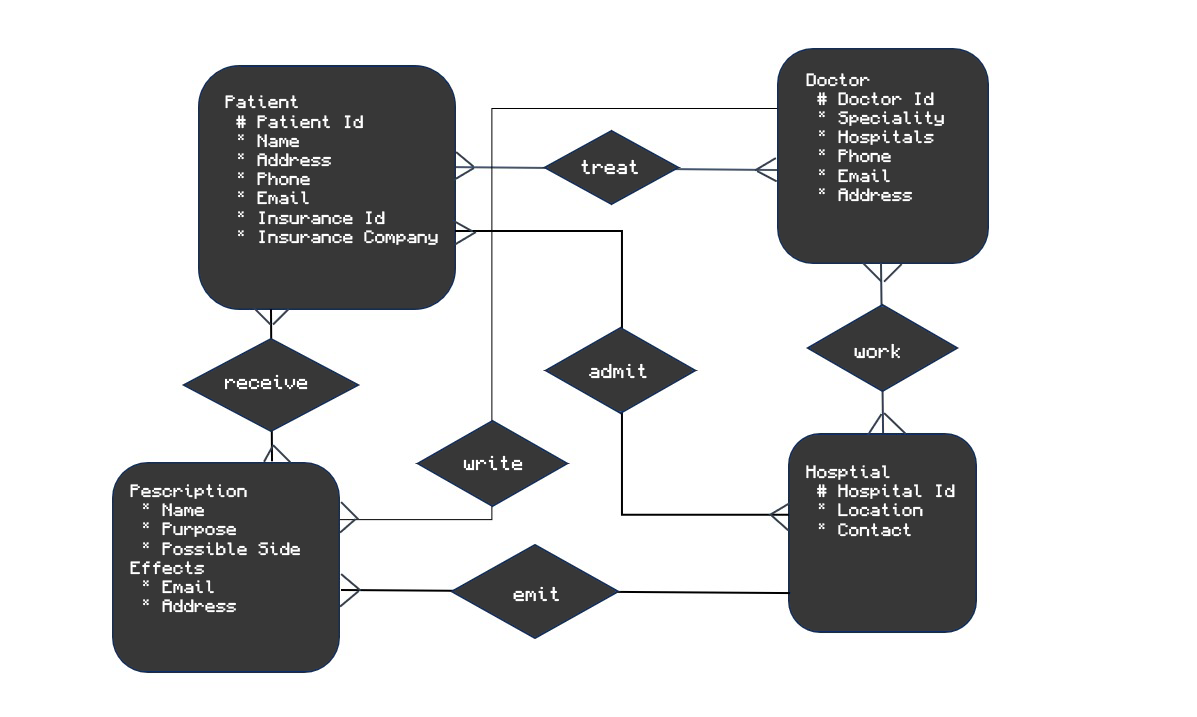
<style>
.page{position:relative;width:1197px;height:717px;background:#ffffff}
.page>*{position:absolute;margin:0}
.t1{font:16px "Monocraft";color:#ffffff}
.t2{font:18px "Monocraft";color:#ffffff}
</style>
<div class="page">
<p class="t1" style="left:806px;top:73px;width:138px;height:129px">Doctor<br> # Doctor Id<br> * Speciality<br> * Hospitals<br> * Phone<br> * Email<br> * Address</p>
<p class="t1" style="left:225px;top:95px;width:213px;height:150px">Patient<br> # Patient Id<br> * Name<br> * Address<br> * Phone<br> * Email<br> * Insurance Id<br> * Insurance Company</p>
<p class="t2" style="left:581px;top:159px;width:57px;height:16px">treat</p>
<p class="t2" style="left:854px;top:343px;width:46px;height:16px">work</p>
<p class="t2" style="left:589px;top:363px;width:58px;height:16px">admit</p>
<p class="t2" style="left:225px;top:374px;width:83px;height:16px">receive</p>
<p class="t2" style="left:463px;top:455px;width:60px;height:16px">write</p>
<p class="t1" style="left:806px;top:465px;width:149px;height:72px">Hosptial<br> # Hospital Id<br> * Location<br> * Contact</p>
<p class="t1" style="left:130px;top:484px;width:170px;height:129px">Pescription<br> * Name<br> * Purpose<br> * Possible Side Effects<br> * Email<br> * Address</p>
<p class="t2" style="left:513px;top:586px;width:46px;height:16px">emit</p>
</div>
